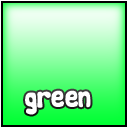
<style>
.page{position:relative;width:128px;height:128px}
.page>*{position:absolute;margin:0}
.t1{font:36px "ChubbyCheeks";color:#ffffff}
</style>
<div class="page">
<p class="t1" style="left:25px;top:90px;width:66px;height:25px">green</p>
</div>
